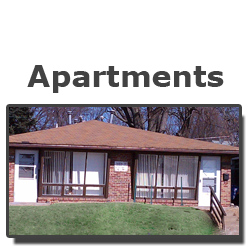
<style>
.page{position:relative;width:250px;height:250px;background:#ffffff}
.page>*{position:absolute;margin:0}
.t1{font:30px "Verdana-Bold";color:#4c4c4c}
</style>
<div class="page">
<p class="t1" style="left:27px;top:65px;width:197px;height:28px">Apartments</p>
</div>
